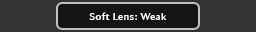
<style>
.page{position:relative;width:256px;height:32px;background:#333333}
.page>*{position:absolute;margin:0}
.t1{font:10px "AmiraParadiso";letter-spacing:0.05em;color:#ffffff}
</style>
<div class="page">
<p class="t1" style="left:89px;top:12px;width:78px;height:8px">Soft Lens: Weak</p>
</div>
